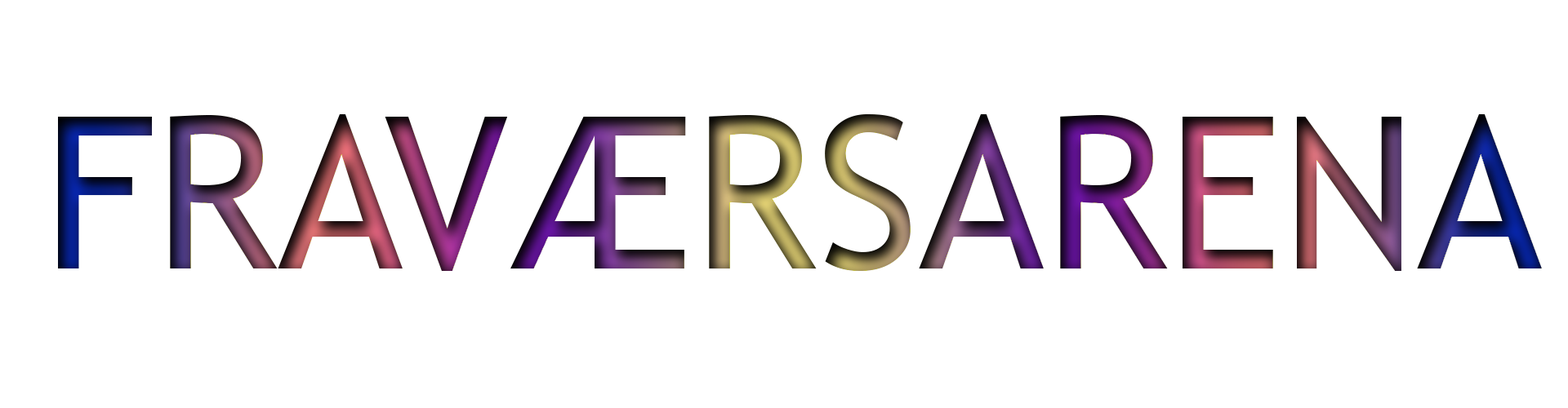
<style>
.page{position:relative;width:1568px;height:408px;background:#ffffff}
.page>*{position:absolute;margin:0}
.t1{font:212.3px "TrebuchetMS"}
</style>
<div class="page">
<p class="t1" style="left:58px;top:114px;width:1484px;height:157px">FRAVÆRSARENA</p>
</div>
